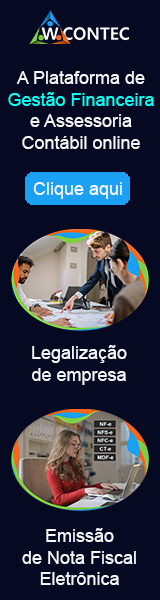
<style>
.page{position:relative;width:160px;height:600px;background:#050922}
.page>*{position:absolute;margin:0}
.t1{font:18px "ArialMT";color:#f6f6f9}
.t2{font:18px "ArialMT";color:#0cfdf4}
.t3{font:18px "ArialMT";color:#f3f7f9}
</style>
<div class="page">
<p class="t1" style="left:8px;top:71px;width:146px;height:78px;text-align:center">A Plataforma de<br><span class="t2">Gestão Financeira<br></span>e Assessoria<br>Contábil online</p>
<p class="t3" style="left:33px;top:182px;width:89px;height:17px">Clique aqui</p>
<p class="t3" style="left:32px;top:345px;width:95px;height:40px;text-align:center">Legalização<br>de empresa</p>
<p class="t3" style="left:22px;top:528px;width:114px;height:57px;text-align:center">Emissão<br>de Nota Fiscal<br>Eletrônica</p>
</div>
